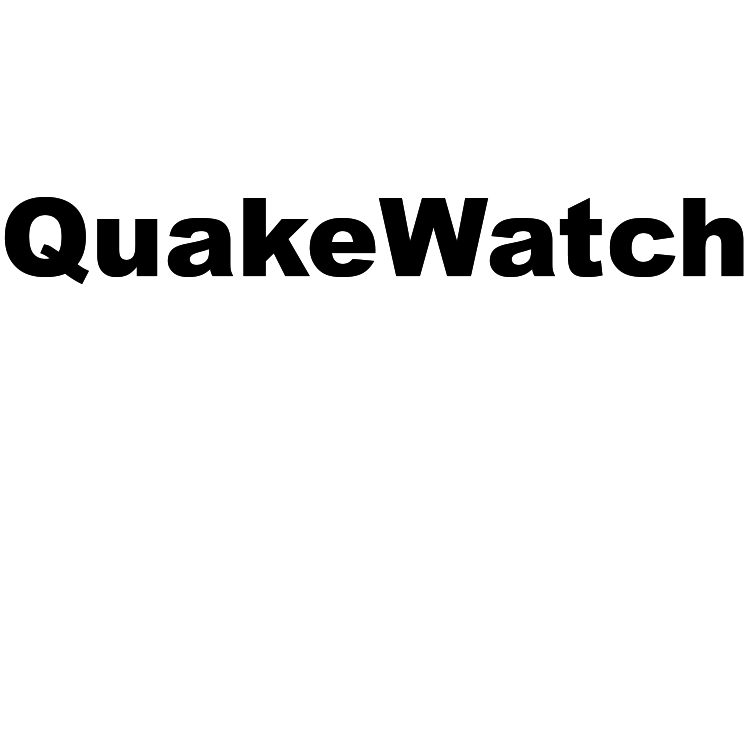
<style>
.page{position:relative;width:750px;height:750px;background:#ffffff}
.page>*{position:absolute;margin:0}
.t1{font:109.3px "Arial-Black";color:#000000}
</style>
<div class="page">
<p class="t1" style="left:4px;top:197px;width:740px;height:87px">QuakeWatch</p>
<p class="t1" style="left:4px;top:197px;width:740px;height:87px">QuakeWatch</p>
</div>
